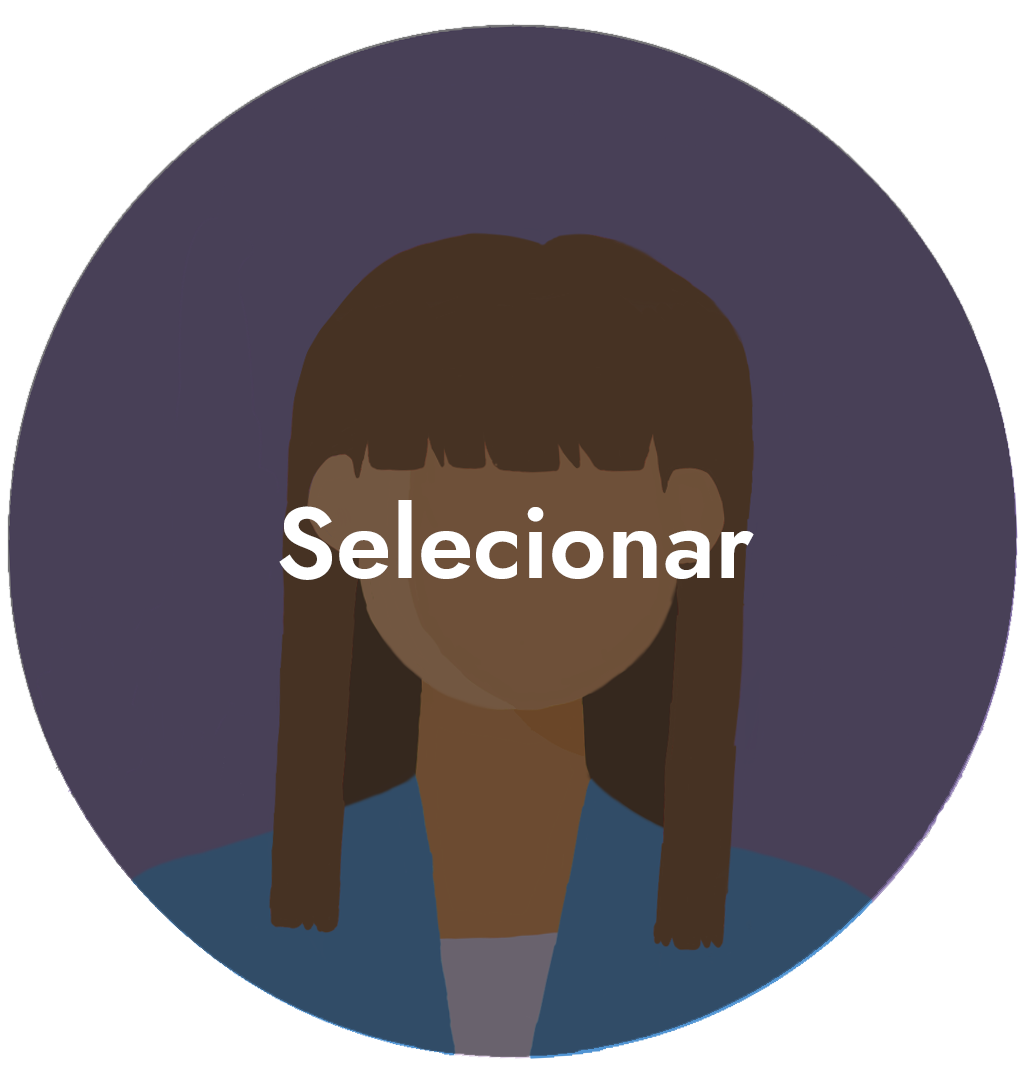
<style>
.page{position:relative;width:1034px;height:1080px;background:#484057}
.page>*{position:absolute;margin:0}
.t1{font:100px "Jost-SemiBold";color:#ffffff}
</style>
<div class="page">
<p class="t1" style="left:279px;top:500px;width:475px;height:80px">Selecionar</p>
</div>
